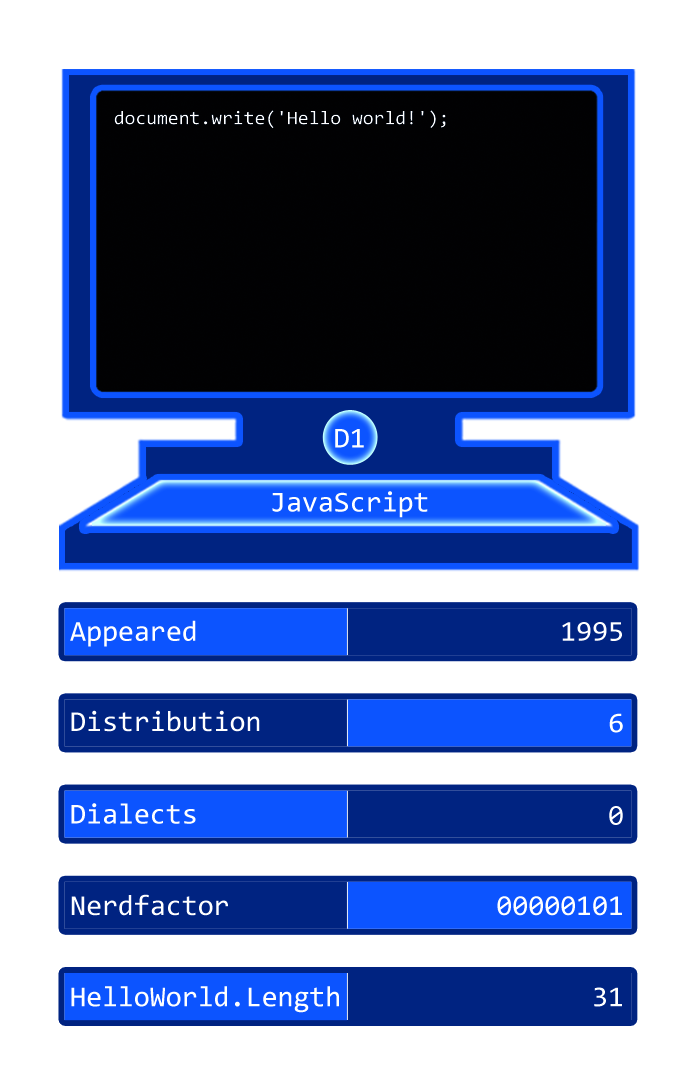
<style>
.page{position:relative;width:697px;height:1087px;background:#ffffff}
.page>*{position:absolute;margin:0}
.t1{font:19.3px "Consolas";color:#ffffff}
.t2{font:29px "Consolas";color:#ffffff}
</style>
<div class="page">
<p class="t1" style="left:114px;top:110px;width:332px;height:19px">document.write('Hello world!');</p>
<p class="t2" style="left:335px;top:429px;width:29px;height:19px">D1</p>
<p class="t2" style="left:272px;top:491px;width:156px;height:27px">JavaScript</p>
<p class="t2" style="left:70px;top:620px;width:126px;height:27px">Appeared</p>
<p class="t2" style="left:562px;top:622px;width:60px;height:19px">1995</p>
<p class="t2" style="left:71px;top:710px;width:189px;height:22px">Distribution</p>
<p class="t2" style="left:609px;top:713px;width:14px;height:20px">6</p>
<p class="t2" style="left:71px;top:803px;width:125px;height:21px">Dialects</p>
<p class="t2" style="left:609px;top:806px;width:14px;height:19px">0</p>
<p class="t2" style="left:71px;top:894px;width:157px;height:22px">Nerdfactor</p>
<p class="t2" style="left:497px;top:896px;width:125px;height:20px">00000101</p>
<p class="t2" style="left:71px;top:986px;width:268px;height:27px">HelloWorld.Length</p>
<p class="t2" style="left:594px;top:987px;width:28px;height:20px">31</p>
</div>
